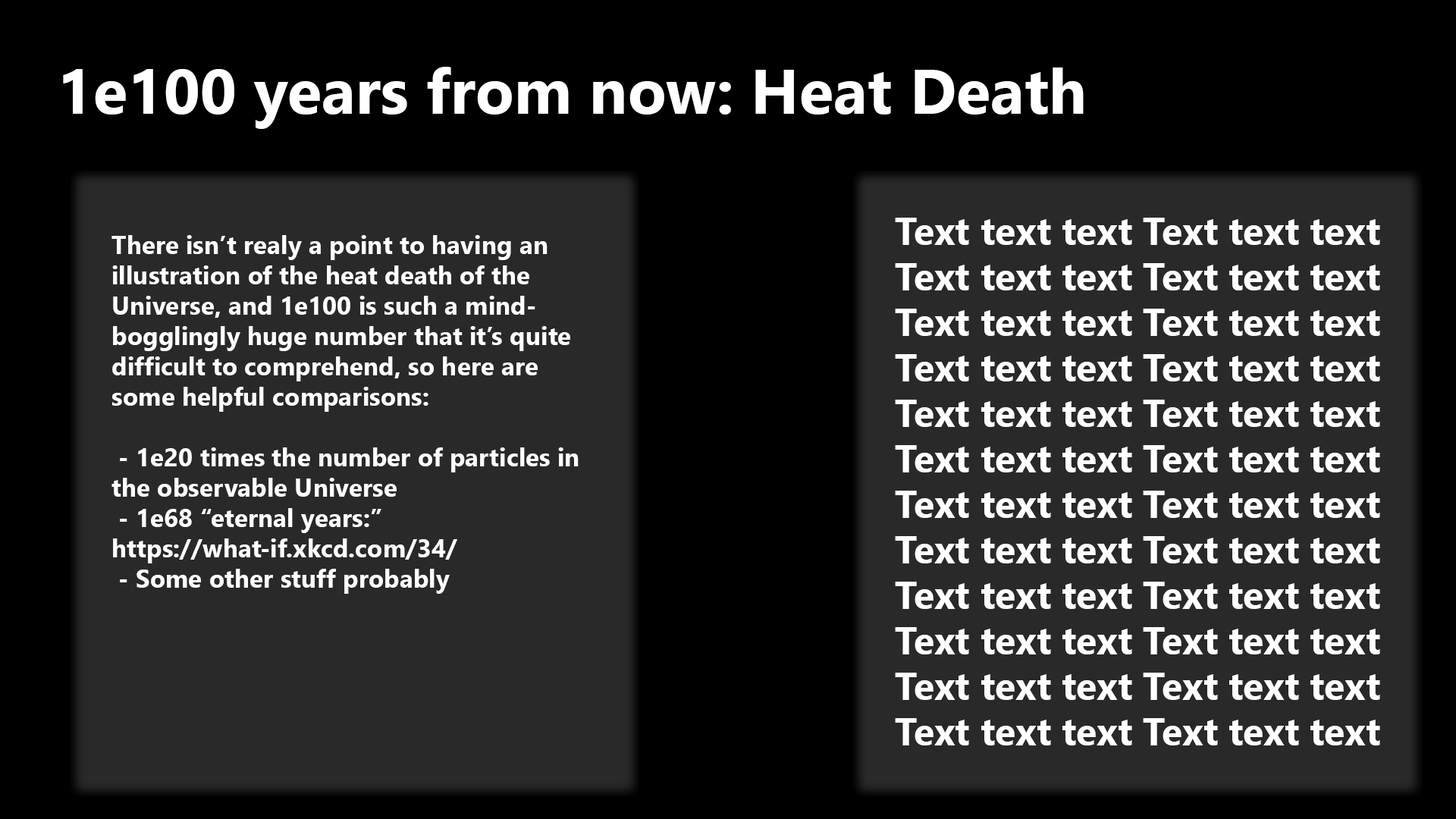
<style>
.page{position:relative;width:1456px;height:819px;background:#292929}
.page>*{position:absolute;margin:0}
.t1{font:63.2px "SegoeUI-Bold";color:#ffffff}
.t2{font:9.1px "SegoeUI-Bold";color:#ffffff}
.t3{font:25.3px "SegoeUI-Bold";color:#ffffff}
</style>
<div class="page">
<p class="t1" style="left:63px;top:67px;width:1021px;height:62px">1e100 years from now: Heat Death</p>
<p class="t2" style="left:895px;top:218px;width:485px;height:527px">Text text text Text text text<br>Text text text Text text text<br>Text text text Text text text<br>Text text text Text text text<br>Text text text Text text text<br>Text text text Text text text<br>Text text text Text text text<br>Text text text Text text text<br>Text text text Text text text<br>Text text text Text text text<br>Text text text Text text text<br>Text text text Text text text</p>
<p class="t3" style="left:111px;top:235px;width:468px;height:359px">There isn’t realy a point to having an<br>illustration of the heat death of the<br>Universe, and 1e100 is such a mind-<br>bogglingly huge number that it’s quite<br>difficult to comprehend, so here are<br>some helpful comparisons:<br><br> - 1e20 times the number of particles in<br>the observable Universe<br> - 1e68 “eternal years:”<br>https://what-if.xkcd.com/34/<br> - Some other stuff probably</p>
</div>
